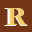
<style>
.page{position:relative;width:32px;height:32px;background:#743517}
.page>*{position:absolute;margin:0}
.t1{font:28.1px "Garamond-Bold";scale:1.25 1}
.t2{font:26.4px "Garamond-Bold";color:#f0ca62;scale:1.1 1}
</style>
<div class="page">
<p class="t1" style="left:4px;top:8px;width:24px;height:18px">R</p>
<p class="t2" style="left:7px;top:8px;width:20px;height:17px">R</p>
</div>
